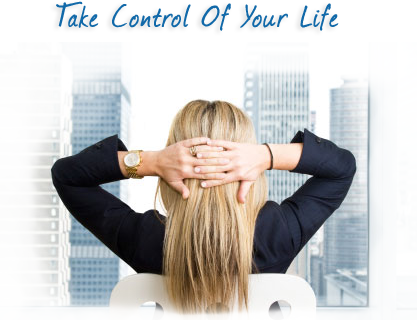
<style>
.page{position:relative;width:417px;height:320px}
.page>*{position:absolute;margin:0}
.t1{font:36px "Journal";letter-spacing:0.05em;color:#1169a9;font-weight:bold}
</style>
<div class="page">
<p class="t1" style="left:56px;top:1px;width:283px;height:30px">Take Control Of Your Life</p>
</div>
